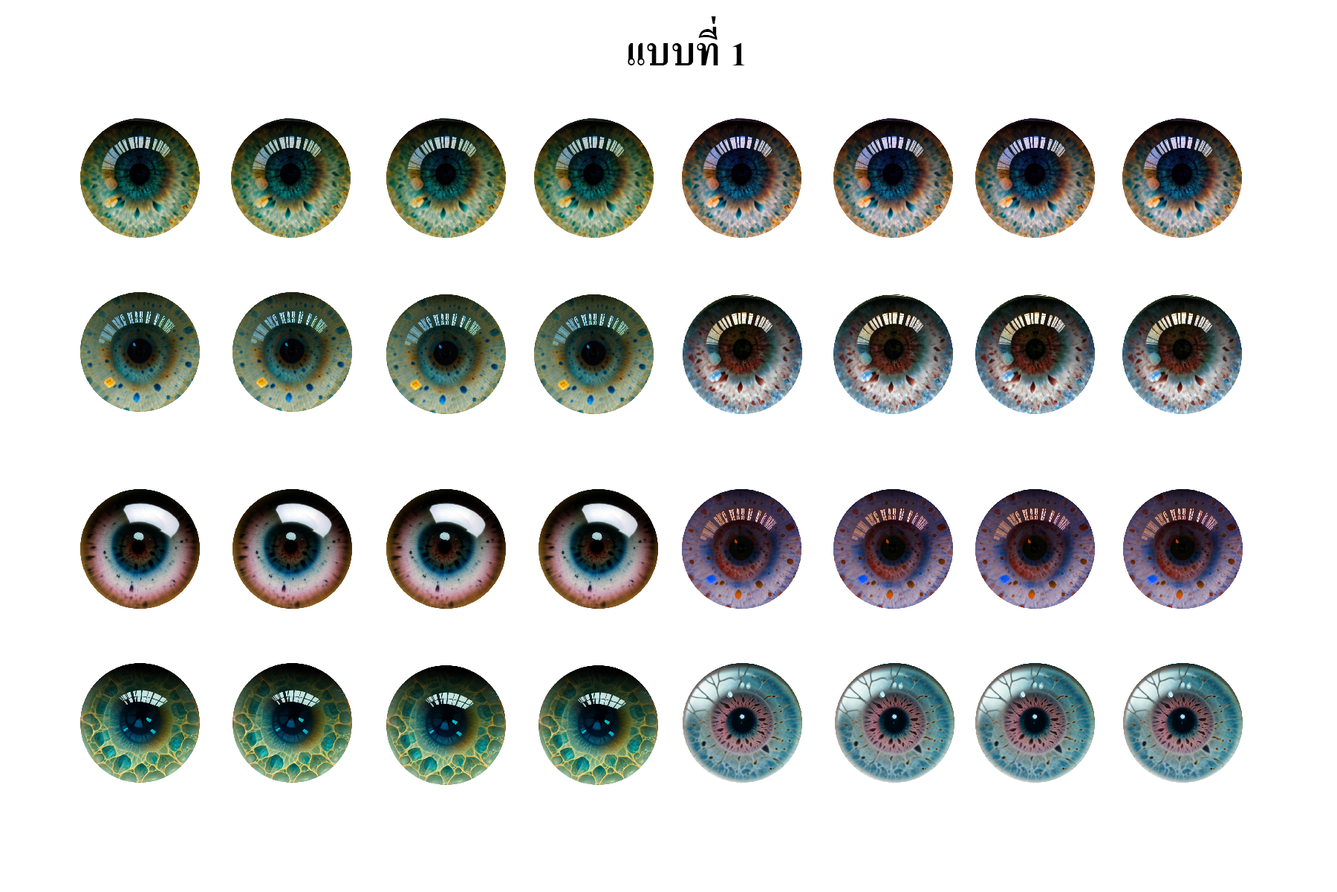
<style>
.page{position:relative;width:1337px;height:892px;background:#ffffff}
.page>*{position:absolute;margin:0}
.t1{font:55.7px "AngsanaNew-Bold";color:#000000}
</style>
<div class="page">
<p class="t1" style="left:628px;top:16px;width:117px;height:49px">เเบบที่ 1</p>
</div>
